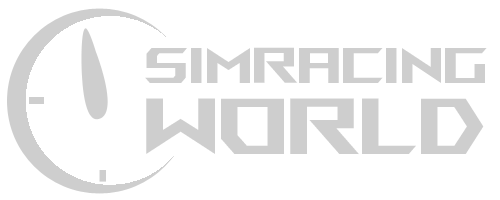
<style>
.page{position:relative;width:500px;height:200px;background:#ffffff}
.page>*{position:absolute;margin:0}
.t1{font:50px "ROGFonts-Regular";color:#cecece}
.t2{font:79.2px "ROGFonts-Regular";color:#cecece}
</style>
<div class="page">
<p class="t1" style="left:145px;top:47px;width:342px;height:36px">SIMRACING</p>
<p class="t2" style="left:146px;top:98px;width:338px;height:57px">WORLD</p>
</div>
